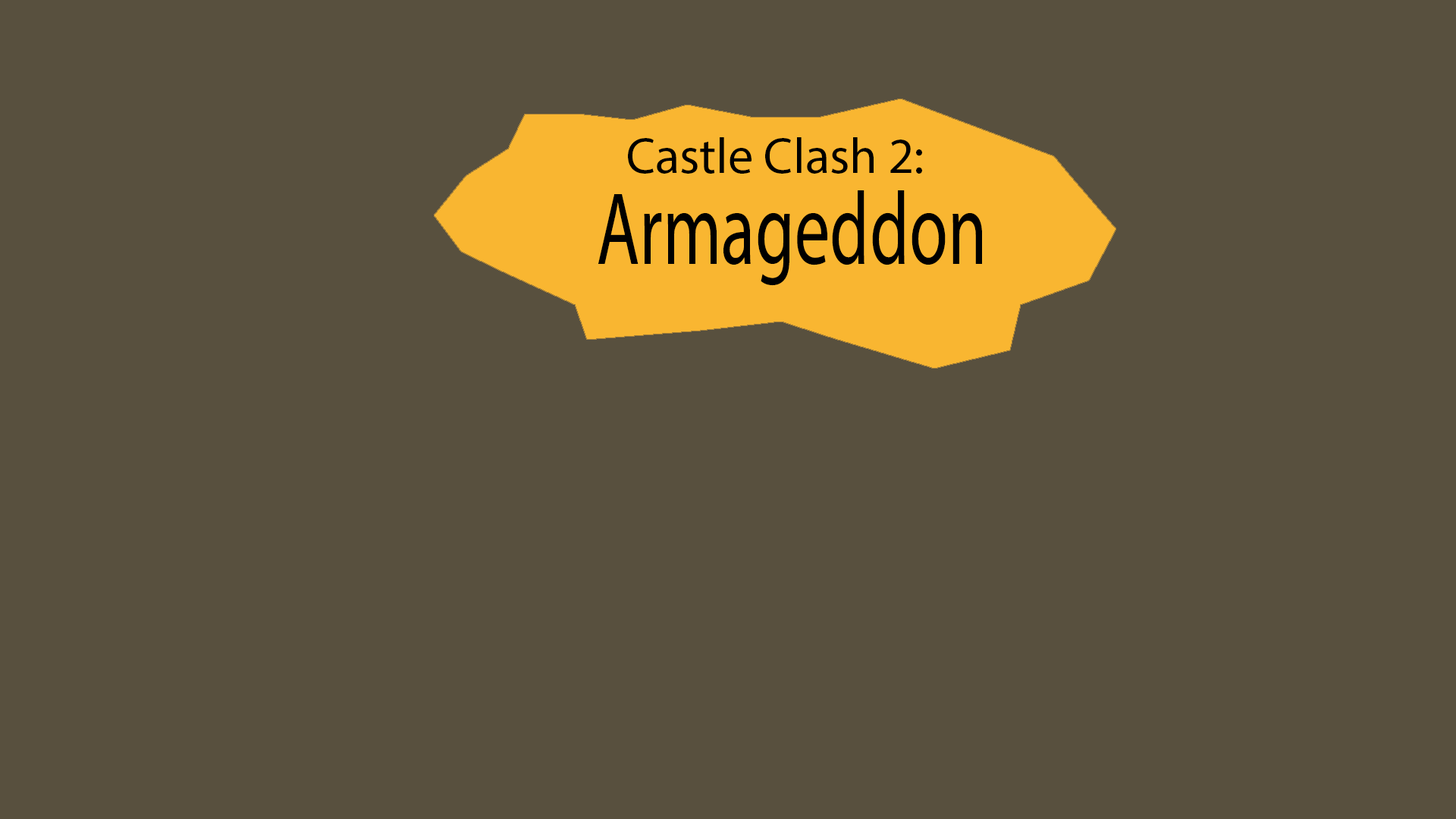
<style>
.page{position:relative;width:1456px;height:819px;background:#58503e}
.page>*{position:absolute;margin:0}
.t1{font:50.4px "MyriadPro-Regular";color:#000000}
.t2{font:103.4px "MyriadPro-Regular";color:#000000;scale:0.68 1}
</style>
<div class="page">
<p class="t1" style="left:628px;top:137px;width:294px;height:37px">Castle Clash 2:</p>
<p class="t2" style="left:598px;top:190px;width:384px;height:96px">Armageddon</p>
</div>
